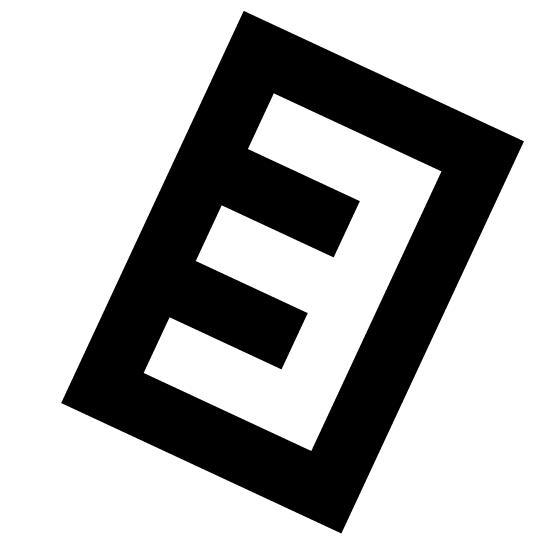
<style>
.page{position:relative;width:556px;height:556px;background:#ffffff}
.page>*{position:absolute;margin:0}
.t1{font:494px "Kenney-Blocks";color:#000000}
</style>
<div class="page">
<p class="t1" style="left:61px;top:11px;width:463px;height:523px;rotate:25deg">3</p>
</div>
